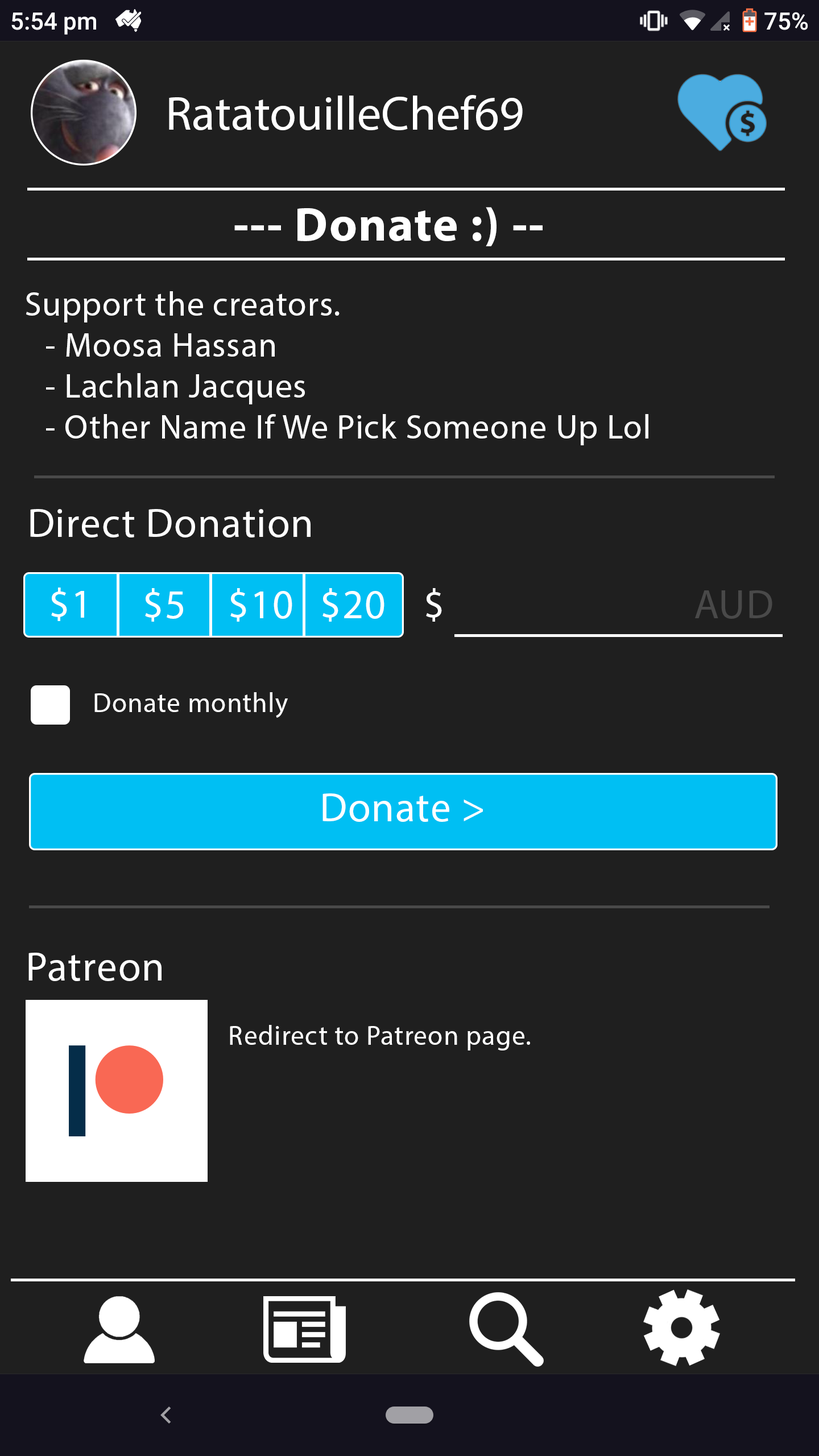
<style>
.page{position:relative;width:819px;height:1456px;background:#1f1f1f}
.page>*{position:absolute;margin:0}
.t1{font:48.3px "MyriadPro-Regular";color:#ffffff}
.t2{font:48.3px "MyriadPro-Bold";letter-spacing:0.025em;color:#ffffff}
.t3{font:34.1px "MyriadPro-Regular";letter-spacing:0.025em;color:#ffffff}
.t4{font:40.9px "MyriadPro-Regular";letter-spacing:0.025em;color:#ffffff}
.t5{font:40.9px "MyriadPro-Regular";letter-spacing:0.025em;color:#494949}
.t6{font:27.3px "MyriadPro-Regular";letter-spacing:0.025em;color:#ffffff}
</style>
<div class="page">
<p class="t1" style="left:169px;top:95px;width:354px;height:35px">RatatouilleChef69</p>
<p class="t2" style="left:234px;top:207px;width:309px;height:39px">--- Donate :) --</p>
<p class="t3" style="left:26px;top:291px;width:622px;height:154px">Support the creators.<br> - Moosa Hassan<br> - Lachlan Jacques<br> - Other Name If We Pick Someone Up Lol</p>
<p class="t4" style="left:30px;top:509px;width:281px;height:28px">Direct Donation</p>
<p class="t4" style="left:51px;top:588px;width:33px;height:33px">$1</p>
<p class="t4" style="left:145px;top:588px;width:38px;height:34px">$5</p>
<p class="t4" style="left:230px;top:588px;width:62px;height:34px">$10</p>
<p class="t4" style="left:322px;top:588px;width:62px;height:34px">$20</p>
<p class="t4" style="left:426px;top:588px;width:16px;height:34px">$</p>
<p class="t5" style="left:695px;top:590px;width:77px;height:29px">AUD</p>
<p class="t6" style="left:94px;top:692px;width:194px;height:26px">Donate monthly</p>
<p class="t4" style="left:322px;top:793px;width:161px;height:29px">Donate &gt;</p>
<p class="t4" style="left:28px;top:953px;width:134px;height:28px">Patreon</p>
<p class="t6" style="left:230px;top:1025px;width:300px;height:25px">Redirect to Patreon page.</p>
</div>
